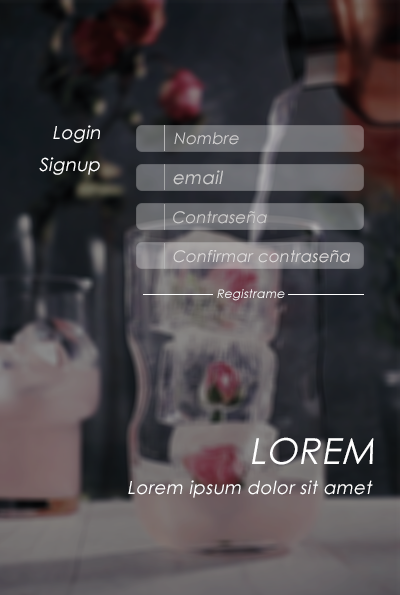
<style>
.page{position:relative;width:400px;height:595px}
.page>*{position:absolute;margin:0}
.t1{font:18px "CenturyGothic";letter-spacing:0.025em;color:#ffffff;font-style:italic}
.t2{font:16px "CenturyGothic";letter-spacing:0.025em;color:#d5d3d3;font-style:italic}
.t3{font:18px "CenturyGothic";letter-spacing:0.025em;color:#b4b3b3;font-style:italic}
.t4{font:16px "CenturyGothic";letter-spacing:0.025em;color:#cdcccc;font-style:italic}
.t5{font:16px "CenturyGothic";letter-spacing:0.025em;color:#d0cccc;font-style:italic}
.t6{font:12px "CenturyGothic";letter-spacing:0.025em;color:#ffffff;font-style:italic}
.t7{font:36px "CenturyGothic";letter-spacing:0.025em;color:#ffffff;font-style:italic}
</style>
<div class="page">
<p class="t1" style="left:53px;top:125px;width:47px;height:18px">Login</p>
<p class="t2" style="left:174px;top:132px;width:65px;height:13px">Nombre</p>
<p class="t1" style="left:39px;top:157px;width:61px;height:18px">Signup</p>
<p class="t3" style="left:173px;top:170px;width:50px;height:15px">email</p>
<p class="t4" style="left:173px;top:211px;width:94px;height:13px">Contraseña</p>
<p class="t5" style="left:173px;top:250px;width:177px;height:13px">Confirmar contraseña</p>
<p class="t6" style="left:217px;top:289px;width:68px;height:12px">Registrame</p>
<p class="t7" style="left:252px;top:437px;width:122px;height:28px">LOREM</p>
<p class="t1" style="left:128px;top:480px;width:245px;height:18px">Lorem ipsum dolor sit amet</p>
</div>
